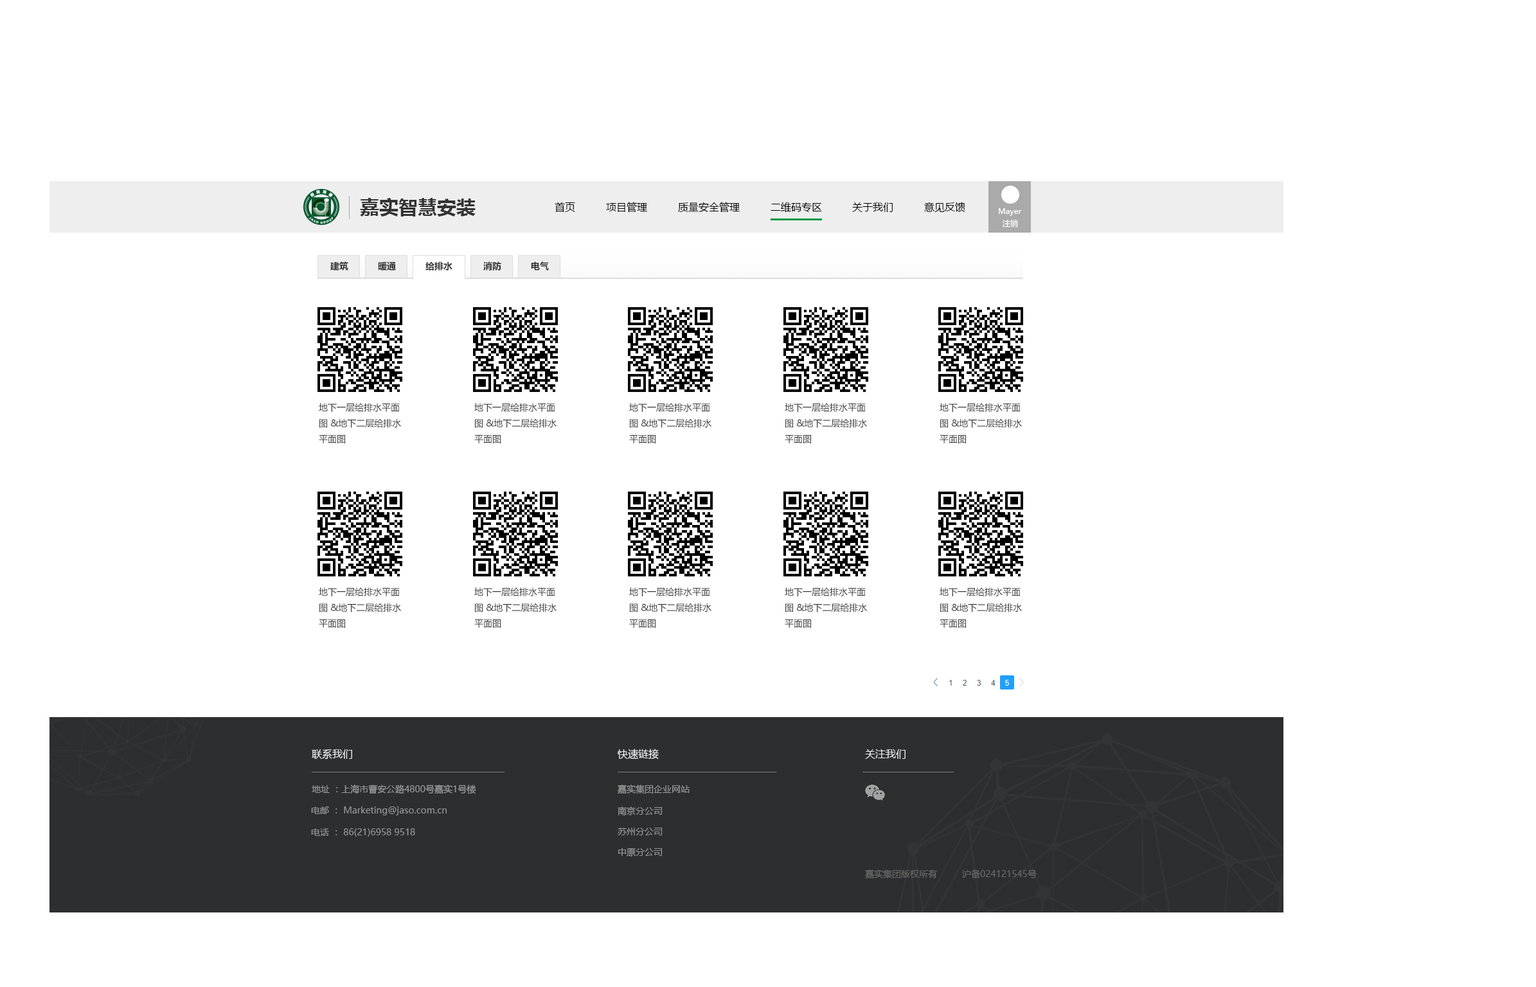
<style>
.page{position:relative;width:1536px;height:987px;background:#ffffff}
.page>*{position:absolute;margin:0}
.t1{font:19.3px "MicrosoftYaHei-Bold";color:#333333}
.t2{font:10.3px "MicrosoftYaHei";color:#000000}
.t3{font:7.7px "MicrosoftYaHei";color:#ffffff}
.t4{font:7.7px "MicrosoftYaHei";color:#fefefe}
.t5{font:9px "MicrosoftYaHei-Bold";color:#333333}
.t6{font:9px "MicrosoftYaHei";color:#333333}
.t7{font:10.3px "MicrosoftYaHei";color:#eeeeee}
.t8{font:9px "MicrosoftYaHei";color:#969696}
.t9{font:9px "MicrosoftYaHei";color:#686766}
</style>
<div class="page">
<p class="t1" style="left:360px;top:198px;width:116px;height:19px">嘉实智慧安装</p>
<p class="t2" style="left:555px;top:202px;width:20px;height:11px">首页</p>
<p class="t2" style="left:606px;top:202px;width:41px;height:11px">项目管理</p>
<p class="t2" style="left:678px;top:202px;width:62px;height:11px">质量安全管理</p>
<p class="t2" style="left:771px;top:202px;width:51px;height:10px">二维码专区</p>
<p class="t2" style="left:852px;top:203px;width:41px;height:9px">关于我们</p>
<p class="t2" style="left:924px;top:202px;width:42px;height:10px">意见反馈</p>
<p class="t3" style="left:999px;top:208px;width:23px;height:8px">Mayer</p>
<p class="t4" style="left:1003px;top:219px;width:15px;height:9px">注销</p>
<p class="t5" style="left:330px;top:262px;width:18px;height:9px">建筑</p>
<p class="t5" style="left:378px;top:262px;width:18px;height:9px">暖通</p>
<p class="t5" style="left:426px;top:262px;width:27px;height:9px">给排水</p>
<p class="t5" style="left:483px;top:262px;width:18px;height:9px">消防</p>
<p class="t5" style="left:531px;top:262px;width:18px;height:9px">电气</p>
<p class="t6" style="left:319px;top:403px;width:82px;height:41px">地下一层给排水平面图 &amp;地下二层给排水平面图</p>
<p class="t6" style="left:474px;top:403px;width:83px;height:41px">地下一层给排水平面图 &amp;地下二层给排水平面图</p>
<p class="t6" style="left:629px;top:403px;width:83px;height:41px">地下一层给排水平面图 &amp;地下二层给排水平面图</p>
<p class="t6" style="left:785px;top:403px;width:82px;height:41px">地下一层给排水平面图 &amp;地下二层给排水平面图</p>
<p class="t6" style="left:940px;top:403px;width:82px;height:41px">地下一层给排水平面图 &amp;地下二层给排水平面图</p>
<p class="t6" style="left:319px;top:588px;width:82px;height:40px">地下一层给排水平面图 &amp;地下二层给排水平面图</p>
<p class="t6" style="left:474px;top:588px;width:83px;height:40px">地下一层给排水平面图 &amp;地下二层给排水平面图</p>
<p class="t6" style="left:629px;top:588px;width:83px;height:40px">地下一层给排水平面图 &amp;地下二层给排水平面图</p>
<p class="t6" style="left:785px;top:588px;width:82px;height:40px">地下一层给排水平面图 &amp;地下二层给排水平面图</p>
<p class="t6" style="left:940px;top:588px;width:82px;height:40px">地下一层给排水平面图 &amp;地下二层给排水平面图</p>
<p class="t7" style="left:312px;top:750px;width:40px;height:10px">联系我们</p>
<p class="t7" style="left:618px;top:749px;width:41px;height:10px">快速链接</p>
<p class="t7" style="left:865px;top:750px;width:41px;height:9px">关注我们</p>
<p class="t8" style="left:312px;top:785px;width:164px;height:10px">地址 ：上海市曹安公路4800号嘉实1号楼</p>
<p class="t8" style="left:618px;top:785px;width:72px;height:10px">嘉实集团企业网站</p>
<p class="t8" style="left:311px;top:807px;width:136px;height:9px">电邮 ： Marketing@jaso.com.cn</p>
<p class="t8" style="left:618px;top:807px;width:45px;height:9px">南京分公司</p>
<p class="t8" style="left:311px;top:829px;width:104px;height:8px">电话 ： 86(21)6958 9518</p>
<p class="t8" style="left:618px;top:828px;width:45px;height:8px">苏州分公司</p>
<p class="t8" style="left:618px;top:849px;width:45px;height:8px">中原分公司</p>
<p class="t9" style="left:865px;top:870px;width:72px;height:9px">嘉实集团版权所有</p>
<p class="t9" style="left:962px;top:870px;width:75px;height:9px">沪备024121545号</p>
</div>
